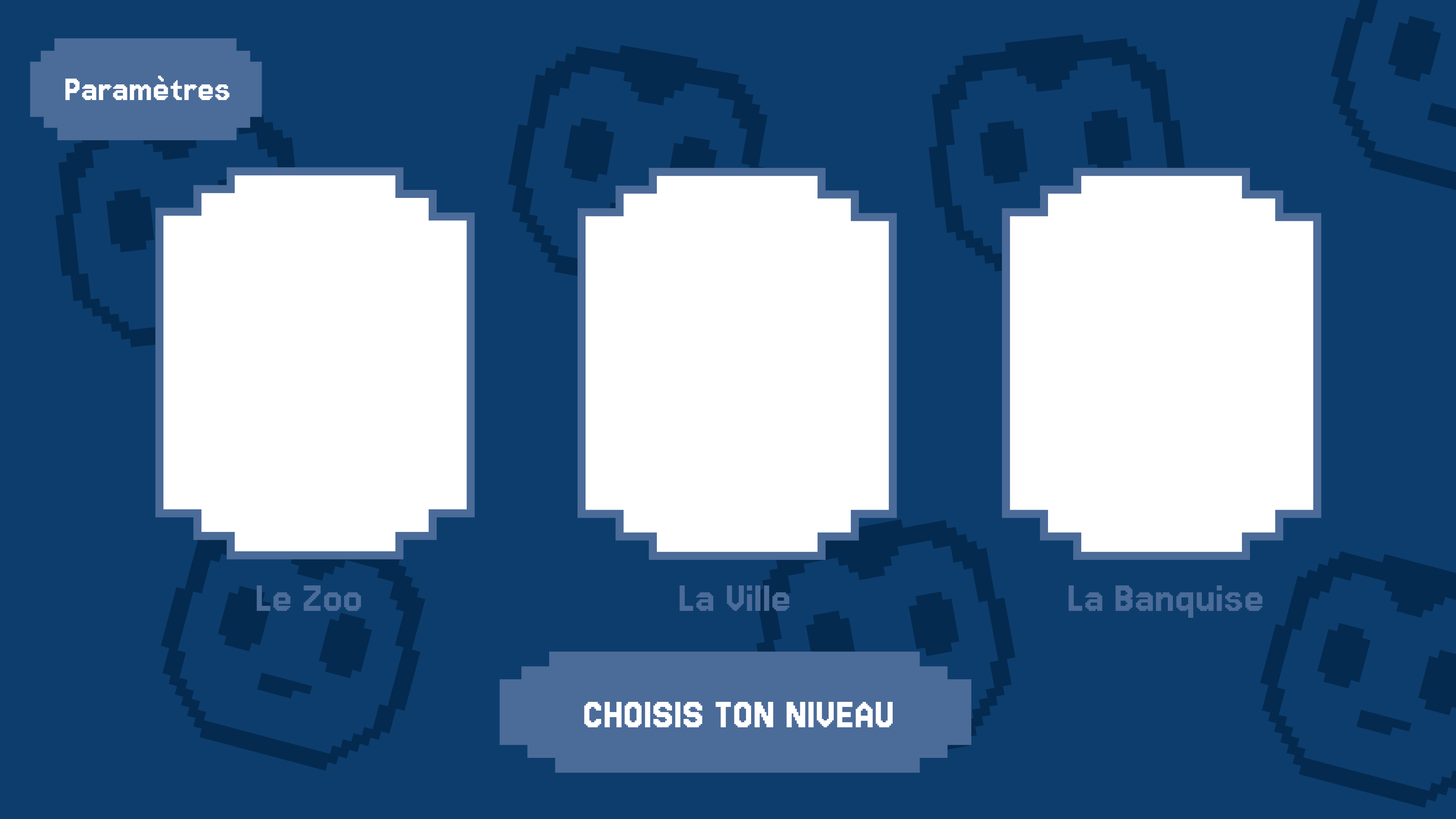
<style>
.page{position:relative;width:1456px;height:819px;background:#0c3d6d}
.page>*{position:absolute;margin:0}
.t1{font:37.9px "Jersey15-Regular";color:#ffffff}
.t2{font:45.5px "Jersey15-Regular";color:#4b6b99}
.t3{font:45.5px "Jersey15-Regular";color:#ffffff}
</style>
<div class="page">
<p class="t1" style="left:65px;top:76px;width:165px;height:24px">Paramètres</p>
<p class="t2" style="left:257px;top:585px;width:104px;height:26px">Le Zoo</p>
<p class="t2" style="left:679px;top:585px;width:110px;height:26px">La Ville</p>
<p class="t2" style="left:1068px;top:585px;width:194px;height:33px">La Banquise</p>
<p class="t3" style="left:584px;top:702px;width:309px;height:25px">CHOISIS TON NIVEAU</p>
</div>
